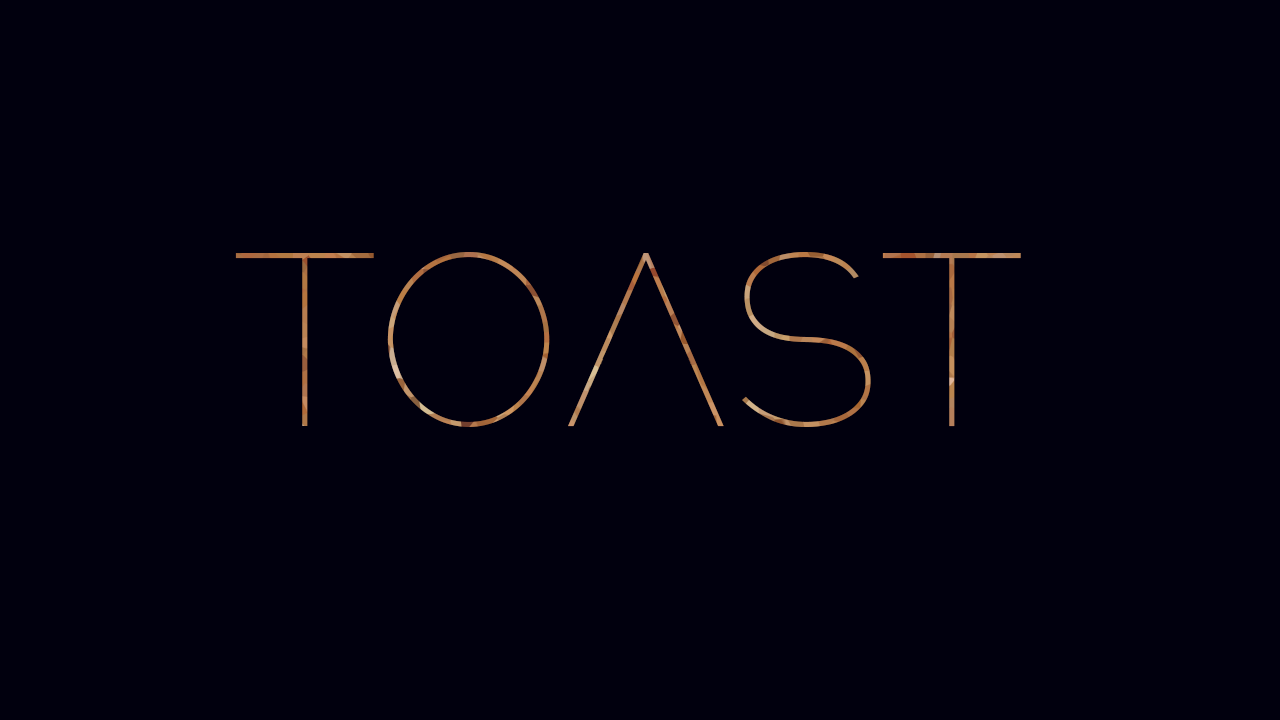
<style>
.page{position:relative;width:1280px;height:720px;background:#01000e}
.page>*{position:absolute;margin:0}
.t1{font:244px "Raleway-Thin"}
</style>
<div class="page">
<p class="t1" style="left:235px;top:252px;width:786px;height:175px">TOAST</p>
</div>
